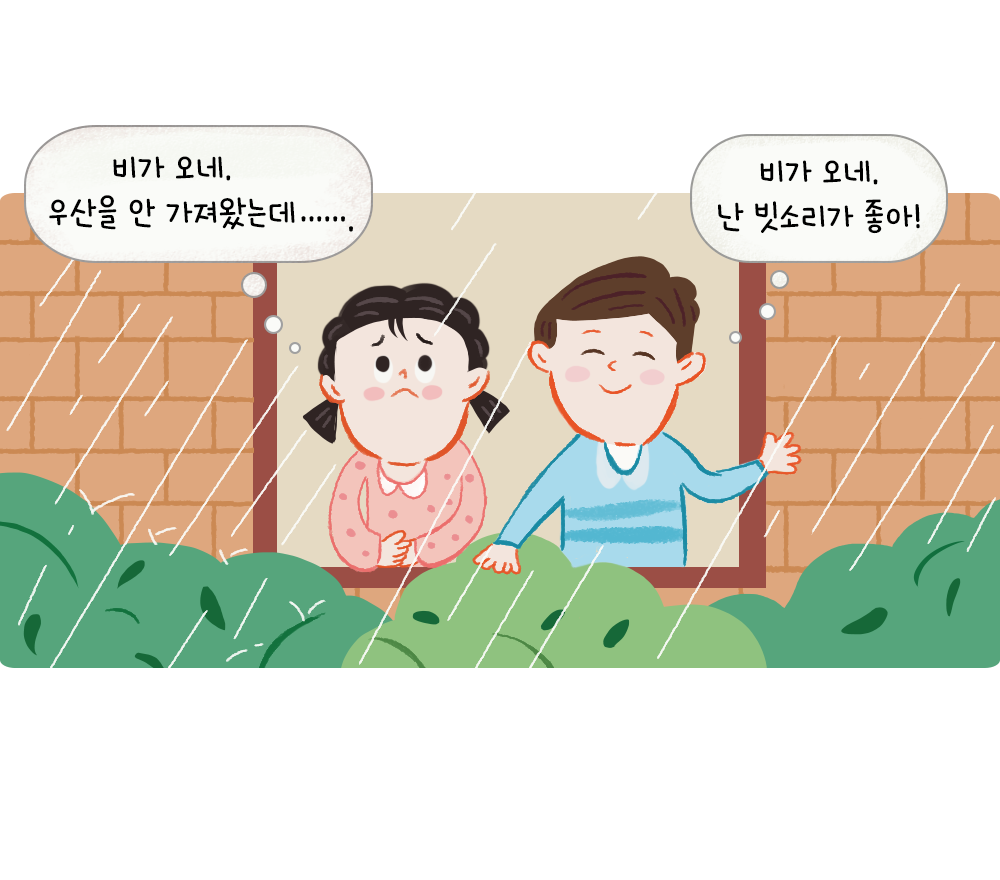
<style>
.page{position:relative;width:1000px;height:880px;background:#ffffff}
.page>*{position:absolute;margin:0}
.t1{font:37.5px "HakgyoansimNadeuriOTF-L";color:#000000}
</style>
<div class="page">
<p class="t1" style="left:49px;top:156px;width:246px;height:74px;text-align:center">비가 오네.<br>우산을 안 가져왔는데</p>
<p class="t1" style="left:718px;top:160px;width:202px;height:74px;text-align:center">비가 오네.<br>난 빗소리가 좋아!</p>
</div>
